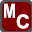
<style>
.page{position:relative;width:32px;height:32px;background:#820000}
.page>*{position:absolute;margin:0}
.t1{font:19.1px "ArialNarrow-Bold";color:#ffffff}
.t2{font:19.1px "Arial-BoldMT";color:#ffffff}
</style>
<div class="page">
<p class="t1" style="left:4px;top:3px;width:11px;height:15px">M</p>
<p class="t2" style="left:16px;top:14px;width:13px;height:15px">C</p>
</div>
